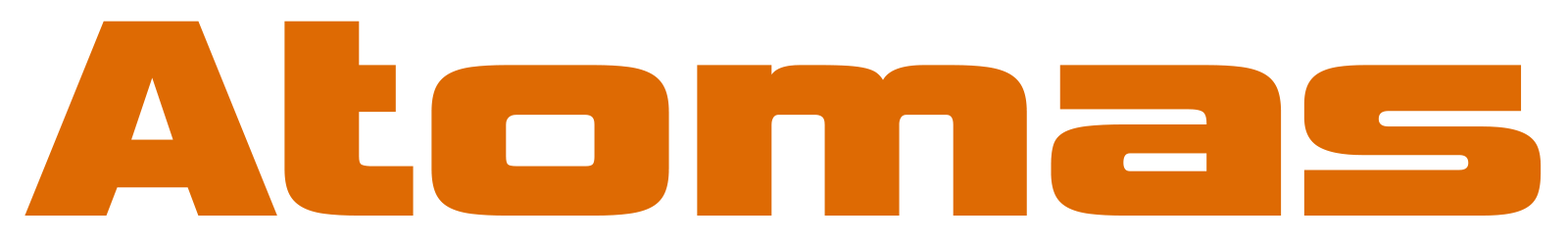
<style>
.page{position:relative;width:1568px;height:243px;background:#ffffff}
.page>*{position:absolute;margin:0}
.t1{font:294px "Vipnagorgialla-Regular";color:#de6a03}
</style>
<div class="page">
<p class="t1" style="left:24px;top:21px;width:1518px;height:195px">Atomas</p>
</div>
